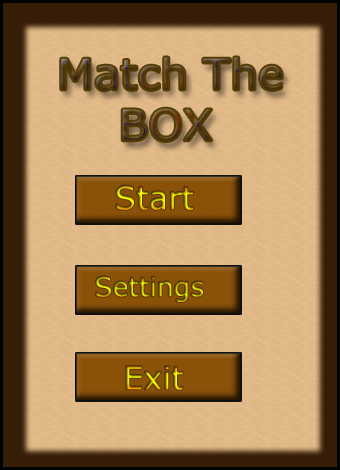
<style>
.page{position:relative;width:340px;height:470px}
.page>*{position:absolute;margin:0}
.t1{font:42.3px "Verdana";scale:1.04 1}
.t2{font:32px "Verdana"}
.t3{font:26.7px "Verdana"}
</style>
<div class="page">
<p class="t1" style="left:61px;top:57px;width:221px;height:84px">Match The<br>    BOX</p>
<p class="t2" style="left:116px;top:185px;width:77px;height:25px">Start</p>
<p class="t3" style="left:95px;top:276px;width:108px;height:26px">Settings</p>
<p class="t2" style="left:126px;top:366px;width:57px;height:24px">Exit</p>
</div>
